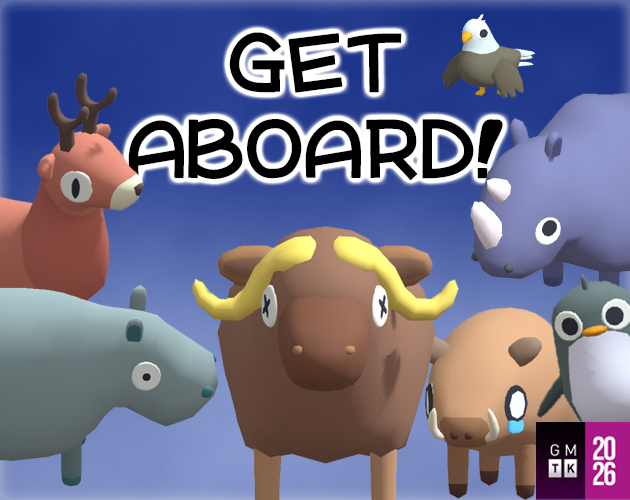
<style>
.page{position:relative;width:630px;height:500px}
.page>*{position:absolute;margin:0}
.t1{font:72px "WarioWareIncV2";color:#000000}
</style>
<div class="page">
<p class="t1" style="left:128px;top:32px;width:375px;height:149px;text-align:center">GET<br>ABOARD!</p>
</div>
